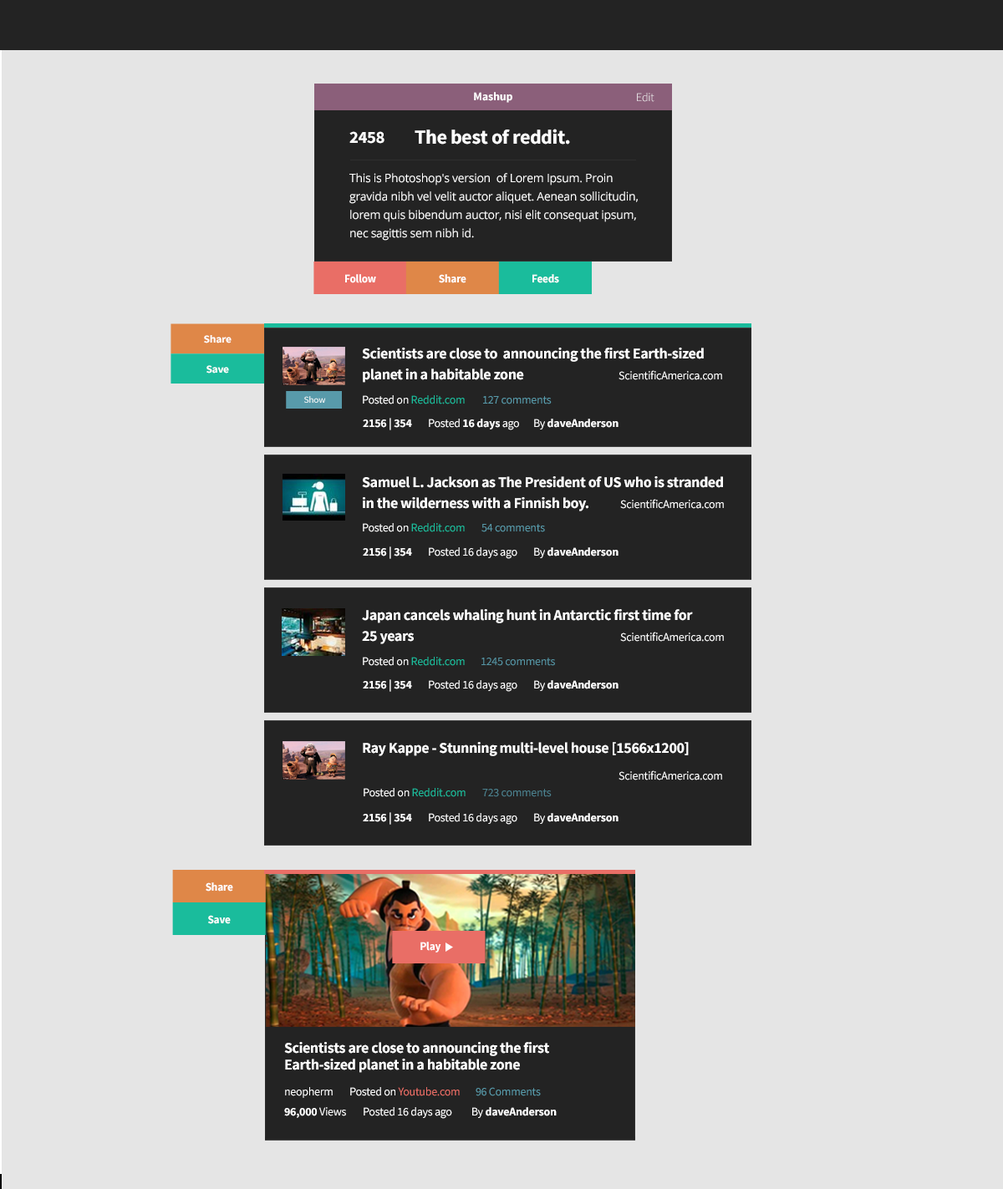
<style>
.page{position:relative;width:1003px;height:1189px;background:#e5e5e5}
.page>*{position:absolute;margin:0}
.t1{font:11.7px "SourceSansPro-Bold";letter-spacing:-0.02em;color:#ffffff}
.t2{font:11.7px "SourceSansPro-Light";letter-spacing:-0.02em}
.t3{font:17.2px "SourceSansPro-Bold";letter-spacing:-0.02em;color:#ffffff}
.t4{font:20.1px "SourceSansPro-Bold";letter-spacing:-0.02em;color:#ffffff}
.t5{font:11.7px/18.4px "OpenSans";letter-spacing:-0.02em;color:#ffffff}
.t6{font:11.7px "SourceSansPro-Bold";letter-spacing:-0.02em;color:#ffffff;scale:0.95 1}
.t7{font:10.8px "SourceSansPro-Bold";letter-spacing:-0.02em;color:#ffffff;scale:1.04 1}
.t8{font:15px/16.7px "SourceSansPro-Bold";letter-spacing:-0.025em;color:#ffffff}
.t9{font:11.7px "SourceSansPro-Regular";letter-spacing:-0.02em;color:#ffffff}
.t10{font:9.2px "SourceSansPro-Regular";letter-spacing:-0.02em;color:#ffffff;scale:1.05 1}
.t11{font:11.7px "SourceSansPro-Regular";letter-spacing:-0.02em;color:#1abc9c}
.t12{font:11.7px "SourceSansPro-Regular";letter-spacing:-0.02em;color:#589aaa}
.t13{font:11.7px "SourceSansPro-Regular";letter-spacing:-0.02em;color:#5594a3}
.t14{font:15px "SourceSansPro-Bold";letter-spacing:-0.025em;color:#ffffff}
.t15{font:11.7px "SourceSansPro-Regular";letter-spacing:-0.02em;color:#4c818e}
.t16{font:11.7px "SourceSansPro-Regular";letter-spacing:-0.02em;color:#e96e66}
</style>
<div class="page">
<p class="t1" style="left:474px;top:92px;width:38px;height:11px">Mashup</p>
<p class="t2" style="left:637px;top:93px;width:17px;height:9px">Edit</p>
<p class="t3" style="left:349px;top:131px;width:35px;height:13px">2458</p>
<p class="t4" style="left:414px;top:129px;width:156px;height:16px">The best of reddit.</p>
<p class="t5" style="left:349px;top:173px;width:289px;height:68px">This is Photoshop's version  of Lorem Ipsum. Proin gravida nibh vel velit auctor aliquet. Aenean sollicitudin, lorem quis bibendum auctor, nisi elit consequat ipsum, nec sagittis sem nibh id.</p>
<p class="t6" style="left:345px;top:274px;width:31px;height:9px">Follow</p>
<p class="t6" style="left:439px;top:274px;width:27px;height:9px">Share</p>
<p class="t6" style="left:532px;top:274px;width:27px;height:9px">Feeds</p>
<p class="t7" style="left:204px;top:335px;width:27px;height:8px">Share</p>
<p class="t8" style="left:362px;top:348px;width:342px;height:35px">Scientists are close to  announcing the first Earth-sized <br>planet in a habitable zone</p>
<p class="t7" style="left:206px;top:365px;width:23px;height:9px">Save</p>
<p class="t9" style="left:618px;top:370px;width:104px;height:10px">ScientificAmerica.com</p>
<p class="t10" style="left:304px;top:396px;width:22px;height:7px">Show</p>
<p class="t11" style="left:363px;top:395px;width:102px;height:9px"><span class="t9">Posted on </span>Reddit.com</p>
<p class="t12" style="left:483px;top:396px;width:69px;height:8px">127 comments</p>
<p class="t1" style="left:363px;top:418px;width:49px;height:12px">2156 | 354</p>
<p class="t1" style="left:429px;top:419px;width:90px;height:11px"><span class="t9">Posted </span>16 days<span class="t9"> ago</span></p>
<p class="t1" style="left:534px;top:419px;width:84px;height:11px"><span class="t9">By </span>daveAnderson</p>
<p class="t8" style="left:362px;top:476px;width:361px;height:35px">Samuel L. Jackson as The President of US who is stranded <br>in the wilderness with a Finnish boy.</p>
<p class="t9" style="left:620px;top:499px;width:104px;height:10px">ScientificAmerica.com</p>
<p class="t11" style="left:363px;top:523px;width:102px;height:9px"><span class="t9">Posted on </span>Reddit.com</p>
<p class="t12" style="left:481px;top:524px;width:64px;height:8px">54 comments</p>
<p class="t1" style="left:363px;top:547px;width:49px;height:12px">2156 | 354</p>
<p class="t9" style="left:429px;top:547px;width:88px;height:12px">Posted 16 days ago</p>
<p class="t1" style="left:534px;top:547px;width:84px;height:11px"><span class="t9">By </span>daveAnderson</p>
<p class="t8" style="left:362px;top:609px;width:331px;height:35px">Japan cancels whaling hunt in Antarctic first time for <br>25 years</p>
<p class="t9" style="left:620px;top:632px;width:104px;height:10px">ScientificAmerica.com</p>
<p class="t11" style="left:363px;top:657px;width:102px;height:9px"><span class="t9">Posted on </span>Reddit.com</p>
<p class="t13" style="left:481px;top:658px;width:74px;height:8px">1245 comments</p>
<p class="t1" style="left:363px;top:679px;width:49px;height:13px">2156 | 354</p>
<p class="t9" style="left:429px;top:680px;width:88px;height:12px">Posted 16 days ago</p>
<p class="t1" style="left:534px;top:680px;width:84px;height:11px"><span class="t9">By </span>daveAnderson</p>
<p class="t14" style="left:363px;top:742px;width:326px;height:14px">Ray Kappe - Stunning multi-level house [1566x1200]</p>
<p class="t9" style="left:618px;top:770px;width:104px;height:10px">ScientificAmerica.com</p>
<p class="t11" style="left:364px;top:788px;width:101px;height:9px"><span class="t9">Posted on </span>Reddit.com</p>
<p class="t15" style="left:482px;top:789px;width:70px;height:8px">723 comments</p>
<p class="t1" style="left:363px;top:812px;width:49px;height:13px">2156 | 354</p>
<p class="t9" style="left:429px;top:813px;width:88px;height:12px">Posted 16 days ago</p>
<p class="t1" style="left:534px;top:813px;width:84px;height:11px"><span class="t9">By </span>daveAnderson</p>
<p class="t6" style="left:206px;top:882px;width:27px;height:10px">Share</p>
<p class="t6" style="left:208px;top:915px;width:23px;height:9px">Save</p>
<p class="t6" style="left:420px;top:942px;width:21px;height:11px">Play</p>
<p class="t8" style="left:284px;top:1042px;width:265px;height:31px">Scientists are close to announcing the first Earth-sized planet in a habitable zone</p>
<p class="t9" style="left:285px;top:1087px;width:48px;height:11px">neopherm</p>
<p class="t16" style="left:350px;top:1087px;width:110px;height:9px"><span class="t9">Posted on </span>Youtube.com</p>
<p class="t12" style="left:475px;top:1087px;width:66px;height:9px">96 Comments</p>
<p class="t1" style="left:284px;top:1107px;width:62px;height:11px">96,000 <span class="t9">Views</span></p>
<p class="t9" style="left:364px;top:1107px;width:88px;height:12px">Posted 16 days ago</p>
<p class="t1" style="left:472px;top:1107px;width:85px;height:11px"><span class="t9">By </span>daveAnderson</p>
</div>
